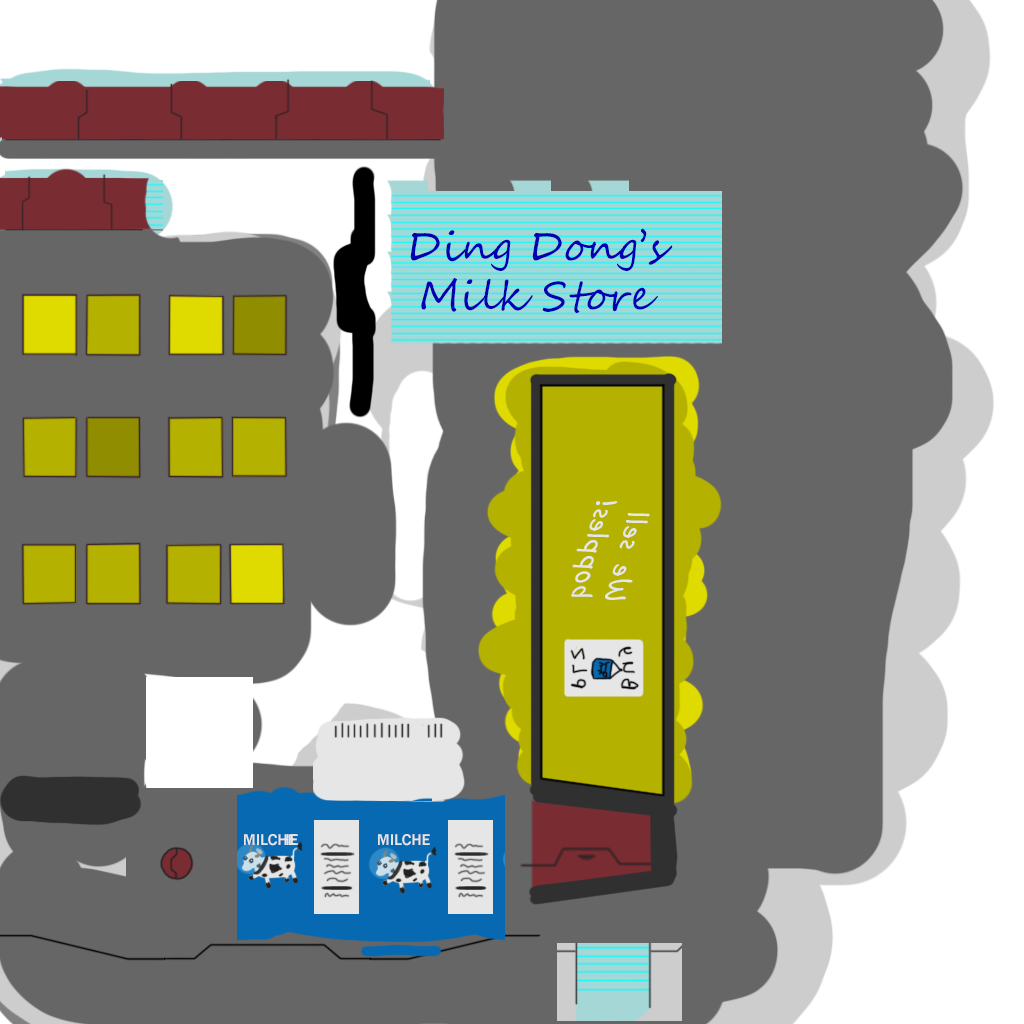
<style>
.page{position:relative;width:1024px;height:1024px;background:#666666}
.page>*{position:absolute;margin:0}
.t1{font:40.8px "SegoeScript";color:#0000b2}
.t2{font:28.3px "MVBoli";color:#e6e6e6}
</style>
<div class="page">
<p class="t1" style="left:410px;top:228px;width:263px;height:85px;text-align:center">Ding Dong’s<br>Milk Store</p>
<p class="t2" style="left:571px;top:501px;width:79px;height:99px;rotate:-75deg">We sell bopples!</p>
</div>
